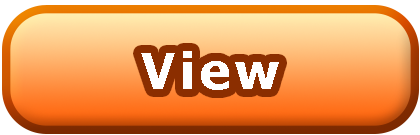
<style>
.page{position:relative;width:420px;height:135px}
.page>*{position:absolute;margin:0}
.t1{font:50px "Tahoma-Bold";letter-spacing:0.1em;color:#ffffff}
</style>
<div class="page">
<p class="t1" style="left:141px;top:51px;width:138px;height:39px">View</p>
</div>
